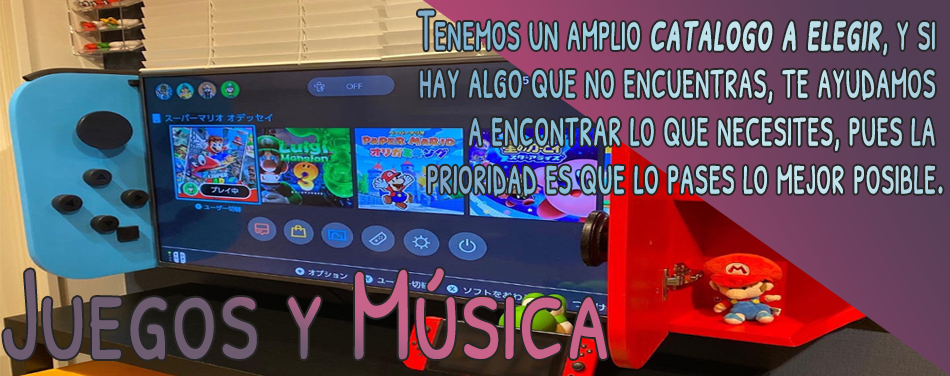
<style>
.page{position:relative;width:950px;height:376px}
.page>*{position:absolute;margin:0}
.t1{font:59.9px/47.9px "PatrickHandSC-Regular";scale:0.57 1}
.t2{font:59.9px/47.9px "PatrickHandSC-Regular";font-weight:bold;font-style:italic;scale:0.57 1}
.t3{font:133.6px "PatrickHandSC-Regular";scale:0.79 1}
</style>
<div class="page">
<p class="t1" style="left:418px;top:10px;width:525px;height:186px;text-align:right">Tenemos un amplio <span class="t2">catalogo a elegir</span>, y si <br>hay algo que no encuentras, te ayudamos <br>a encontrar lo que necesites, pues la <br>prioridad es que lo pases lo mejor posible.</p>
<p class="t3" style="left:3px;top:268px;width:604px;height:92px">Juegos y Música</p>
</div>
